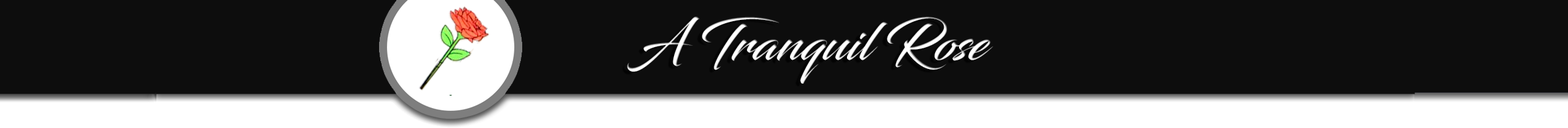
<style>
.page{position:relative;width:1568px;height:128px;background:#0d0d0d}
.page>*{position:absolute;margin:0}
.t1{font:51.3px "Blacksword";color:#ffffff}
</style>
<div class="page">
<p class="t1" style="left:627px;top:17px;width:366px;height:67px">A Tranquil Rose</p>
</div>
